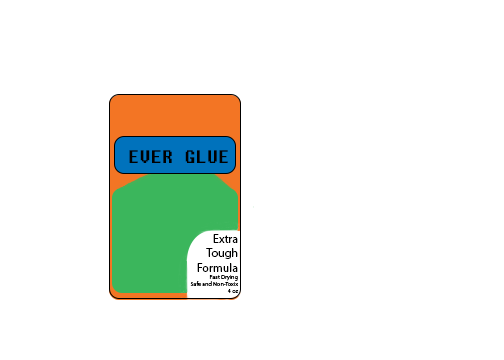
<style>
.page{position:relative;width:504px;height:360px;background:#ffffff}
.page>*{position:absolute;margin:0}
.t1{font:18px "Fixedsys";color:#000000}
.t2{font:6px "MyriadPro-Regular";color:#000000}
.t3{font:12px "MyriadPro-Regular";color:#000000}
</style>
<div class="page">
<p class="t1" style="left:129px;top:150px;width:99px;height:13px">EVER GLUE</p>
<p class="t2" style="left:190px;top:234px;width:49px;height:59px"><span class="t3"><br>   Extra<br>   Tough<br>   Formula<br></span>Fast Drying<br>Safe and Non-Toxix<br>4 oz</p>
</div>
